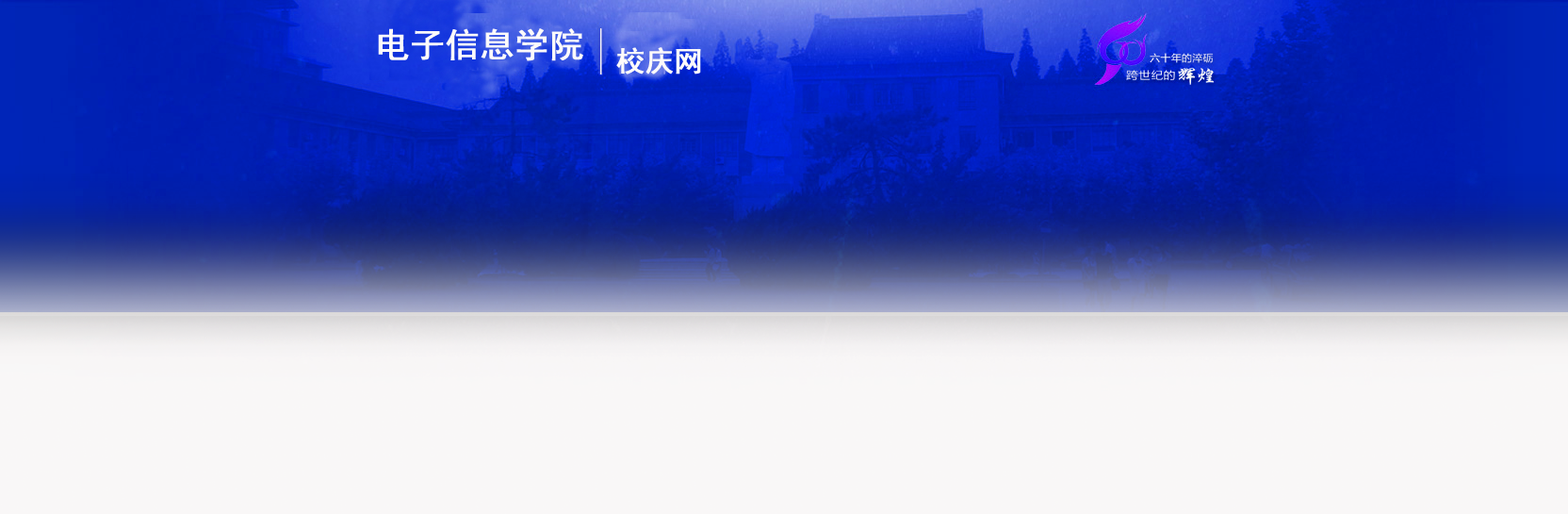
<style>
.page{position:relative;width:1568px;height:514px;background:#f9f7f7}
.page>*{position:absolute;margin:0}
.t1{font:33.9px "SimHei";color:#fdfafa;font-weight:bold}
.t2{font:28.3px "SimHei";color:#fdfafa;font-weight:bold}
</style>
<div class="page">
<p class="t1" style="left:378px;top:28px;width:205px;height:33px">电子信息学院</p>
<p class="t2" style="left:616px;top:47px;width:85px;height:27px">校庆网</p>
</div>
